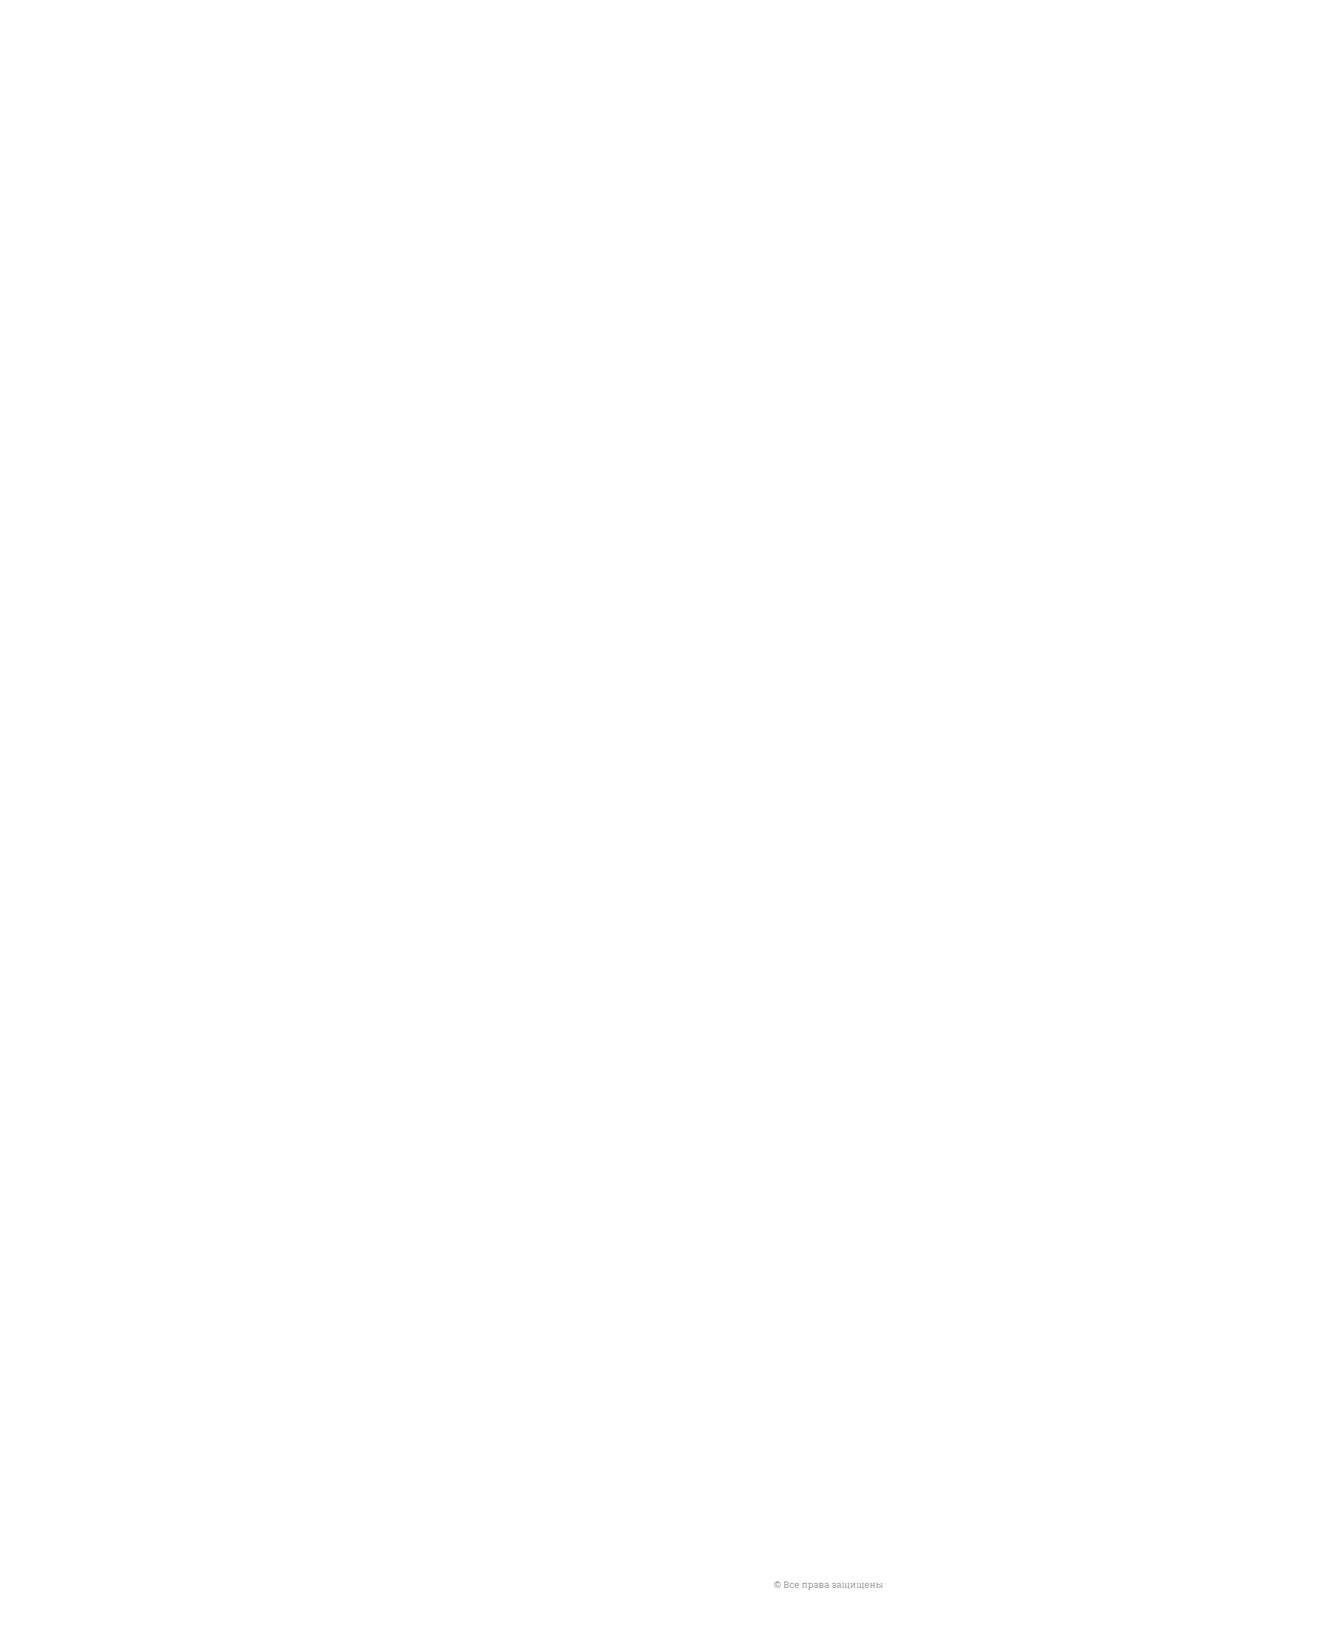
<style>
.page{position:relative;width:1329px;height:1630px;background:#ffffff}
.page>*{position:absolute;margin:0}
.t1{font:9px "RobotoSlab-Light";letter-spacing:0.02em;color:#909090}
</style>
<div class="page">
<p class="t1" style="left:774px;top:1581px;width:109px;height:9px">© Все права защищены</p>
</div>
